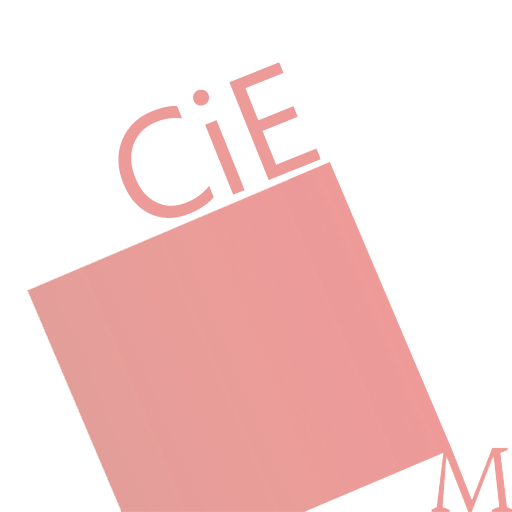
<style>
.page{position:relative;width:512px;height:512px;background:#ffffff}
.page>*{position:absolute;margin:0}
.t1{font:150px "SegoeUIHistoric";color:#ed9b99}
</style>
<div class="page">
<p class="t1" style="left:118px;top:62px;width:203px;height:156px;rotate:-22deg">CiE</p>
</div>
